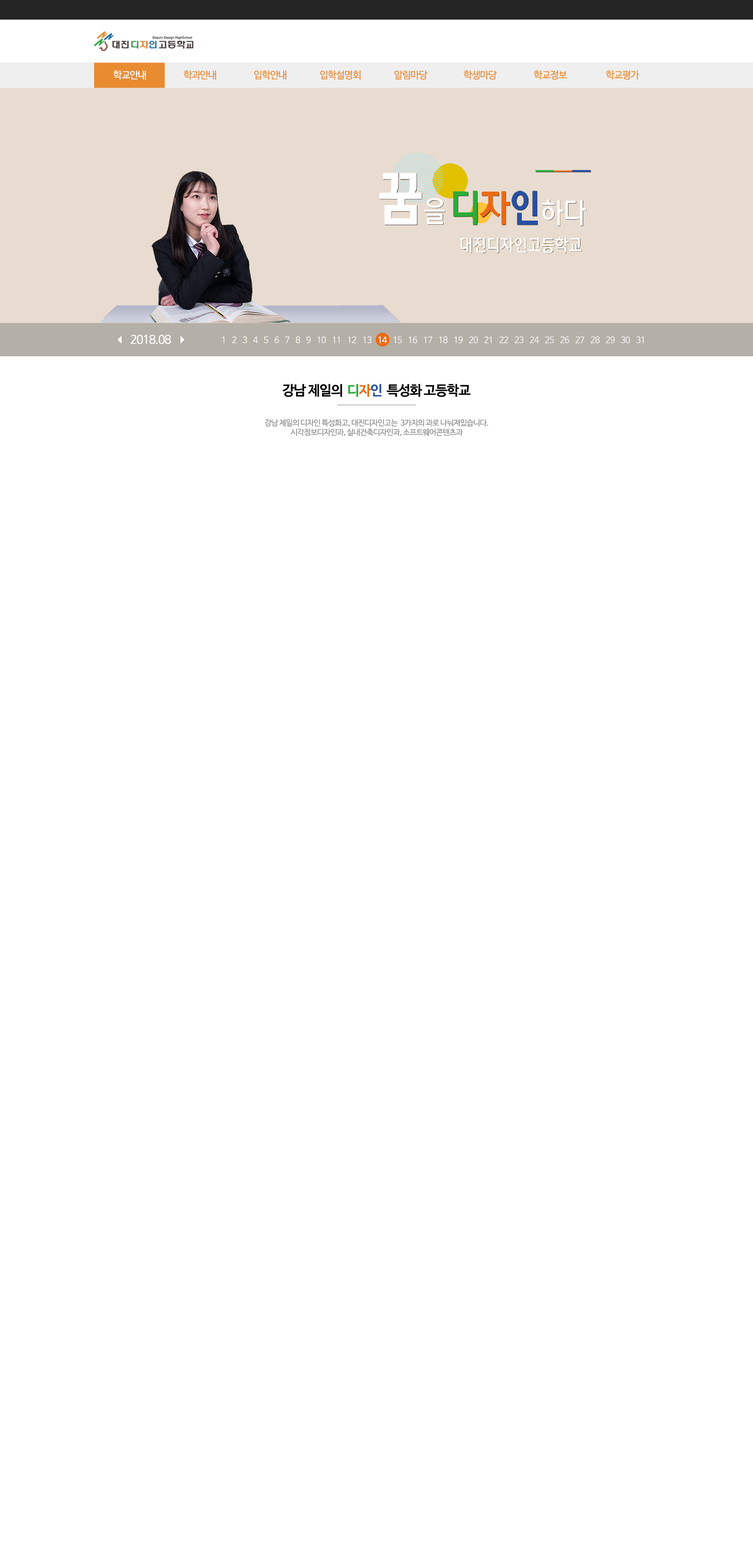
<style>
.page{position:relative;width:753px;height:1568px;background:#ffffff}
.page>*{position:absolute;margin:0}
.t1{font:9.8px "NanumBarunGothic";letter-spacing:-0.05em;color:#ffffff}
.t2{font:9.8px "NanumBarunGothic";letter-spacing:-0.05em;color:#e98b31}
.t3{font:11.8px "NanumBarunGothic";letter-spacing:-0.05em;color:#ffffff}
.t4{font:8.6px "NanumBarunGothic";letter-spacing:-0.05em;color:#ffffff}
.t5{font:13.7px "NanumBarunGothicBold";letter-spacing:-0.05em;color:#000000}
.t6{font:13.7px "NanumBarunGothicBold";letter-spacing:-0.05em;color:#2cac38}
.t7{font:13.7px "NanumBarunGothicBold";letter-spacing:-0.05em;color:#eb6a14}
.t8{font:13.7px "NanumBarunGothicBold";letter-spacing:-0.05em;color:#2850a2}
.t9{font:7.8px "NanumBarunGothic";letter-spacing:-0.05em;color:#8d8d8d}
</style>
<div class="page">
<p class="t1" style="left:113px;top:70px;width:33px;height:10px">학교안내</p>
<p class="t2" style="left:183px;top:70px;width:33px;height:10px">학과안내</p>
<p class="t2" style="left:254px;top:70px;width:32px;height:10px">입학안내</p>
<p class="t2" style="left:320px;top:70px;width:41px;height:10px">입학설명회</p>
<p class="t2" style="left:394px;top:70px;width:33px;height:10px">알림마당</p>
<p class="t2" style="left:463px;top:70px;width:34px;height:10px">학생마당</p>
<p class="t2" style="left:534px;top:70px;width:33px;height:10px">학교정보</p>
<p class="t2" style="left:606px;top:70px;width:33px;height:10px">학교평가</p>
<p class="t3" style="left:131px;top:335px;width:40px;height:9px">2018.08</p>
<p class="t4" style="left:222px;top:336px;width:422px;height:7px;opacity:0.8">1    2    3    4    5    6    7    8    9    10    11    12    13    14    15    16    17    18    19    20    21    22    23    24    25    26    27    28    29    30    31</p>
<p class="t4" style="left:378px;top:336px;width:9px;height:7px">14</p>
<p class="t5" style="left:282px;top:384px;width:188px;height:13px">강남 제일의  <span class="t6">디</span><span class="t7">자</span><span class="t8">인 </span> 특성화 고등학교</p>
<p class="t9" style="left:265px;top:419px;width:223px;height:17px;text-align:center">강남 제일의 디자인 특성화고, 대진디자인고는  3가지의 과로 나눠져있습니다.<br>시각정보디자인과, 실내건축디자인과, 소프트웨어콘텐츠과</p>
</div>
